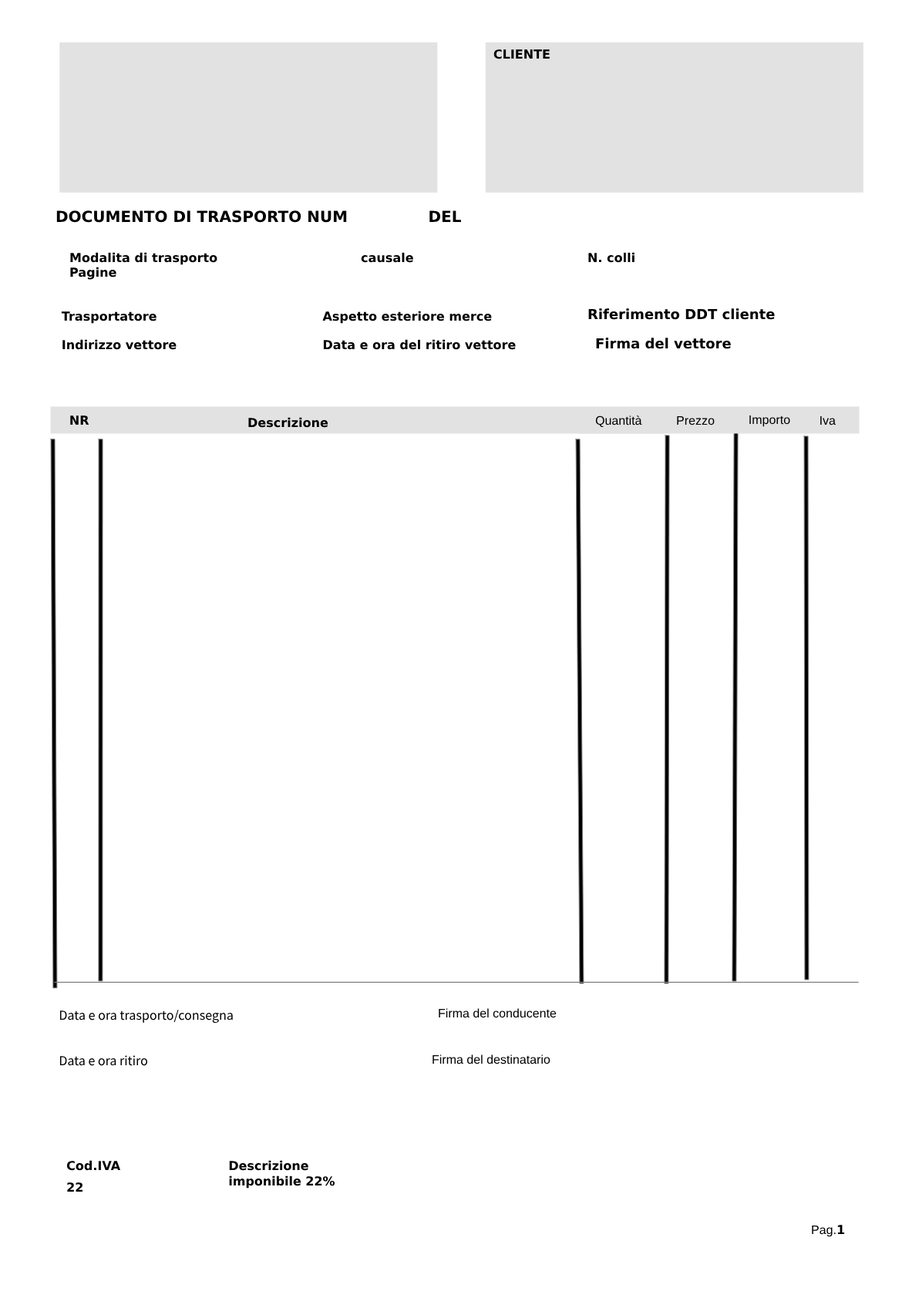
<style>
.page{position:relative;width:919px;height:1298px;background:#ffffff}
.page>*{position:absolute;margin:0}
.t1{font:12.3px "TrebuchetMS#2DBold-Bold";color:#000000}
.t2{font:15.4px "Helvetica#2DBold";color:#000000}
.t3{font:12.3px "TrebuchetMS#2DBold-Bold";letter-spacing:0.002em;color:#000000}
.t4{font:12.3px "TrebuchetMS#2DBold-Bold";letter-spacing:0.001em;color:#000000}
.t5{font:13.9px "Helvetica#2DBold";color:#000000}
.t6{font:12.3px/2.2px "TrebuchetMS#2DBold-Bold";letter-spacing:0.002em;color:#000000}
.t7{font:12.3px/14.3px "ArialMT";letter-spacing:0.002em;color:#000000}
.t8{font:12.3px "ArialMT";letter-spacing:-0.001em;color:#000000}
.t9{font:12.3px "ArialMT";letter-spacing:0.001em;color:#000000}
.t10{font:13.9px "TrebuchetMS";color:#000000}
.t11{font:12.3px "Helvetica";color:#000000}
.t12{font:13.9px "TrebuchetMS";letter-spacing:-0.002em;color:#000000}
.t13{font:12.3px "TrebuchetMS#2DBold-Bold";letter-spacing:-0.002em;color:#000000}
.t14{font:12.3px "ArialMT";letter-spacing:0.002em;color:#000000}
</style>
<div class="page">
<p class="t1" style="left:493px;top:49px;width:57px;height:10px">CLIENTE</p>
<p class="t2" style="left:56px;top:210px;width:405px;height:13px">DOCUMENTO DI TRASPORTO NUM               DEL</p>
<p class="t3" style="left:70px;top:252px;width:564px;height:28px">Modalita di trasporto                                 causale                                        N. colli                                                            Pagine</p>
<p class="t4" style="left:61px;top:311px;width:95px;height:13px">Trasportatore</p>
<p class="t4" style="left:322px;top:311px;width:170px;height:13px">Aspetto esteriore merce</p>
<p class="t5" style="left:588px;top:308px;width:187px;height:12px">Riferimento DDT cliente</p>
<p class="t4" style="left:62px;top:339px;width:114px;height:11px">Indirizzo vettore</p>
<p class="t4" style="left:323px;top:339px;width:193px;height:11px">Data e ora del ritiro vettore</p>
<p class="t5" style="left:596px;top:338px;width:135px;height:11px">Firma del vettore</p>
<p class="t4" style="left:70px;top:415px;width:19px;height:10px">NR</p>
<p class="t6" style="left:248px;top:415px;width:466px;height:13px;text-align:right"><span class="t7">Prezzo</span><br>Descrizione</p>
<p class="t8" style="left:595px;top:415px;width:47px;height:13px">Quantità</p>
<p class="t9" style="left:749px;top:415px;width:41px;height:12px">Importo</p>
<p class="t8" style="left:820px;top:415px;width:15px;height:10px">Iva</p>
<p class="t10" style="left:59px;top:1010px;width:174px;height:14px">Data e ora trasporto/consegna</p>
<p class="t11" style="left:439px;top:1008px;width:117px;height:10px">Firma del conducente</p>
<p class="t12" style="left:59px;top:1055px;width:88px;height:11px">Data e ora ritiro</p>
<p class="t11" style="left:432px;top:1054px;width:118px;height:10px">Firma del destinatario</p>
<p class="t4" style="left:66px;top:1160px;width:55px;height:11px">Cod.IVA</p>
<p class="t13" style="left:229px;top:1160px;width:79px;height:11px">Descrizione</p>
<p class="t13" style="left:229px;top:1175px;width:106px;height:13px">imponibile 22%</p>
<p class="t4" style="left:67px;top:1182px;width:16px;height:10px">22</p>
<p class="t14" style="left:812px;top:1225px;width:33px;height:12px">Pag.<span class="t3">1</span></p>
</div>
